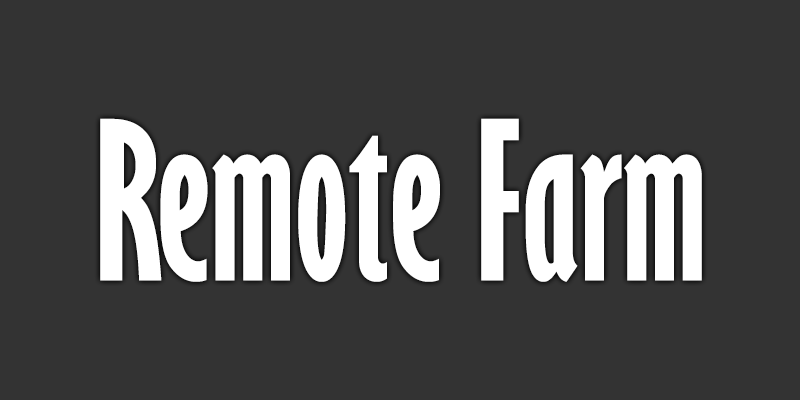
<style>
.page{position:relative;width:800px;height:400px;background:#333333}
.page>*{position:absolute;margin:0}
.t1{font:203px "GillSansMT-ExtraCondensedBold";color:#ffffff}
</style>
<div class="page">
<p class="t1" style="left:100px;top:118px;width:602px;height:164px">Remote Farm</p>
</div>
